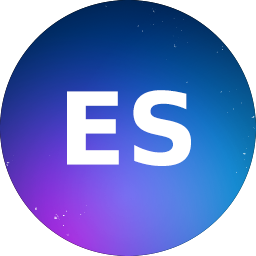
<style>
.page{position:relative;width:256px;height:256px;background:#ffffff}
.page>*{position:absolute;margin:0}
.t1{font:100px "DejaVuSans-Bold";color:#ffffff}
</style>
<div class="page">
<p class="t1" style="left:67px;top:90px;width:124px;height:76px">ES</p>
</div>
